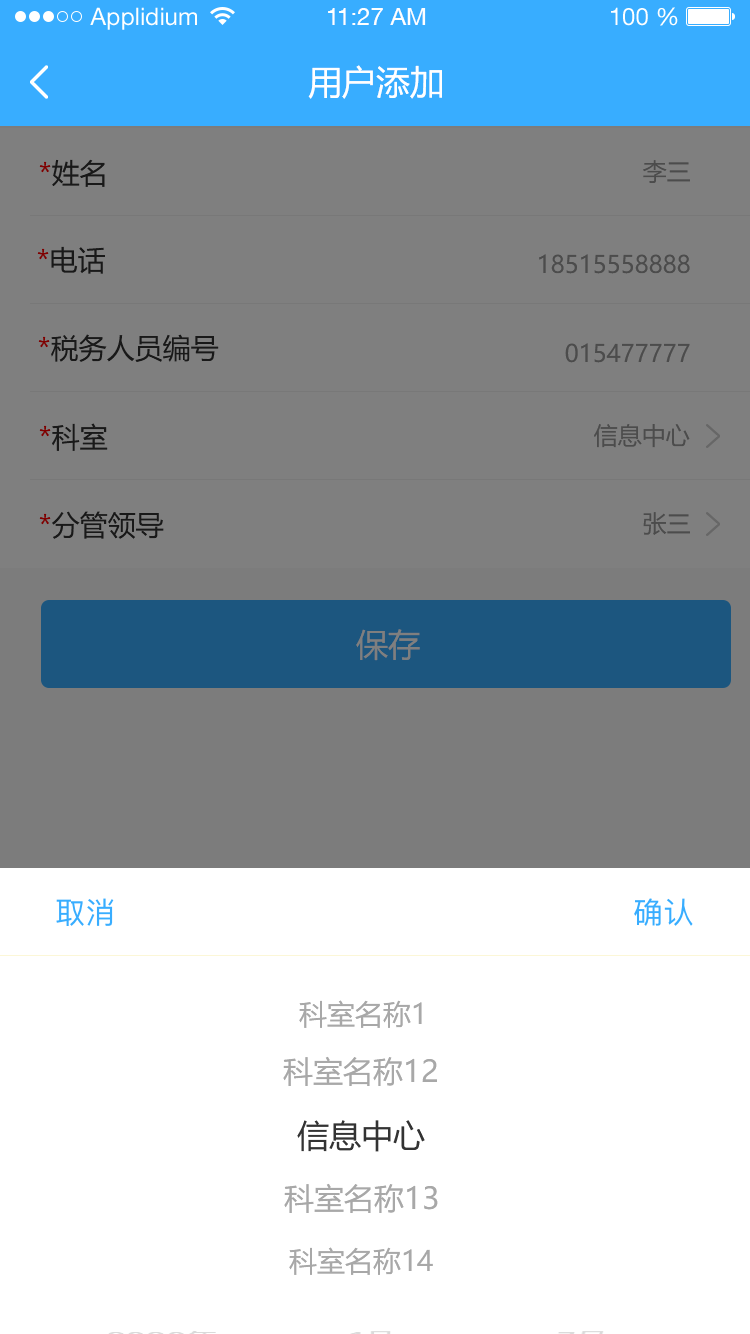
<style>
.page{position:relative;width:750px;height:1334px;background:#ffffff}
.page>*{position:absolute;margin:0}
.t1{font:24px "HelveticaNeueLTStd-Roman";color:#ffffff}
.t2{font:24px "HelveticaNeueCE-Roman";color:#ffffff}
.t3{font:34px "MicrosoftYaHei";color:#ffffff}
.t4{font:28px "MicrosoftYaHei";color:#191919}
.t5{font:24px "MicrosoftYaHei";color:#4c4c4c}
.t6{font:32px "MicrosoftYaHei";color:#7f7f7f}
.t7{font:28px "MicrosoftYaHei";color:#a8a8a8}
.t8{font:30px "MicrosoftYaHei";color:#a8a8a8}
.t9{font:32px "MicrosoftYaHei";color:#333333}
</style>
<div class="page">
<p class="t1" style="left:90px;top:7px;width:107px;height:23px">Applidium</p>
<p class="t2" style="left:328px;top:8px;width:98px;height:17px">11:27 AM</p>
<p class="t1" style="left:611px;top:7px;width:67px;height:19px">100 %</p>
<p class="t3" style="left:308px;top:65px;width:134px;height:34px">用户添加</p>
<p class="t4" style="left:39px;top:159px;width:66px;height:28px">*姓名</p>
<p class="t5" style="left:643px;top:160px;width:47px;height:23px">李三</p>
<p class="t4" style="left:37px;top:246px;width:68px;height:28px">*电话</p>
<p class="t5" style="left:539px;top:254px;width:151px;height:20px">18515558888</p>
<p class="t4" style="left:38px;top:334px;width:181px;height:28px">*税务人员编号</p>
<p class="t5" style="left:565px;top:343px;width:125px;height:20px">015477777</p>
<p class="t4" style="left:39px;top:423px;width:69px;height:28px">*科室</p>
<p class="t5" style="left:594px;top:424px;width:96px;height:24px">信息中心</p>
<p class="t4" style="left:39px;top:511px;width:125px;height:28px">*分管领导</p>
<p class="t5" style="left:643px;top:512px;width:47px;height:23px">张三</p>
<p class="t6" style="left:356px;top:629px;width:64px;height:32px">保存</p>
<p class="t7" style="left:299px;top:1000px;width:123px;height:28px">科室名称1</p>
<p class="t8" style="left:283px;top:1056px;width:154px;height:30px">科室名称12</p>
<p class="t9" style="left:297px;top:1120px;width:128px;height:32px">信息中心</p>
<p class="t8" style="left:284px;top:1183px;width:154px;height:30px">科室名称13</p>
<p class="t7" style="left:289px;top:1247px;width:144px;height:28px">科室名称14</p>
</div>
